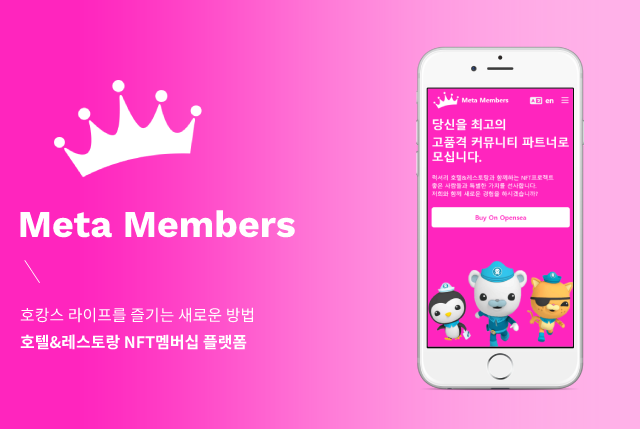
<style>
.page{position:relative;width:640px;height:429px}
.page>*{position:absolute;margin:0}
.t1{font:37.7px "WorkSans-Bold";color:#ffffff}
.t2{font:16px "NotoSansKR-Regular";color:#ffffff}
.t3{font:16px "NotoSansKR-Bold";color:#ffffff}
</style>
<div class="page">
<p class="t1" style="left:20px;top:210px;width:275px;height:28px">Meta Members</p>
<p class="t2" style="left:20px;top:307px;width:234px;height:16px">호캉스 라이프를 즐기는 새로운 방법</p>
<p class="t3" style="left:20px;top:334px;width:227px;height:16px">호텔&amp;레스토랑 NFT멤버십 플랫폼</p>
</div>
